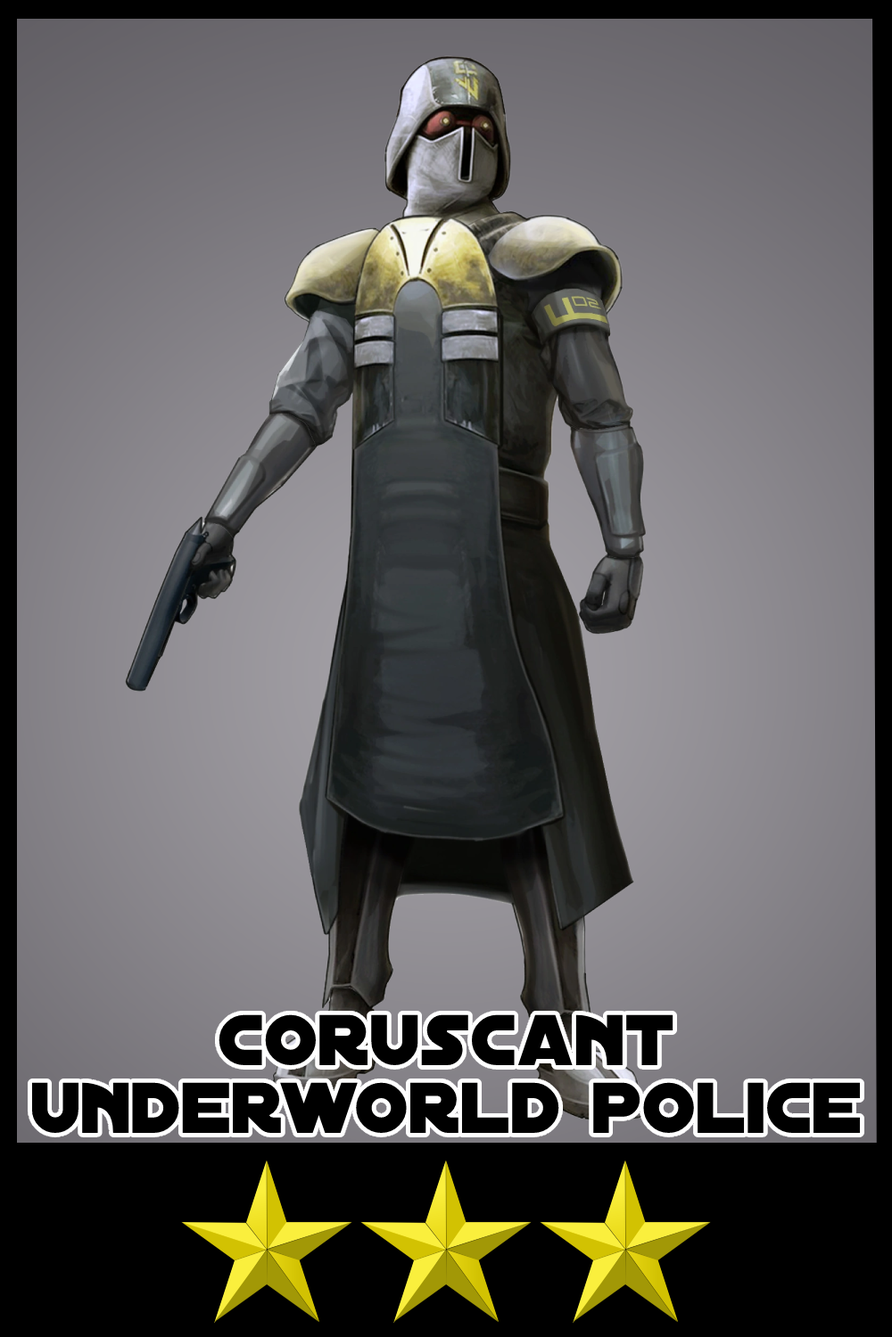
<style>
.page{position:relative;width:892px;height:1337px}
.page>*{position:absolute;margin:0}
.t1{font:77.2px/68.3px "DistantGalaxy";color:#000000}
</style>
<div class="page">
<p class="t1" style="left:32px;top:1015px;width:828px;height:118px;text-align:center">coruscant<br>underworld police</p>
</div>
